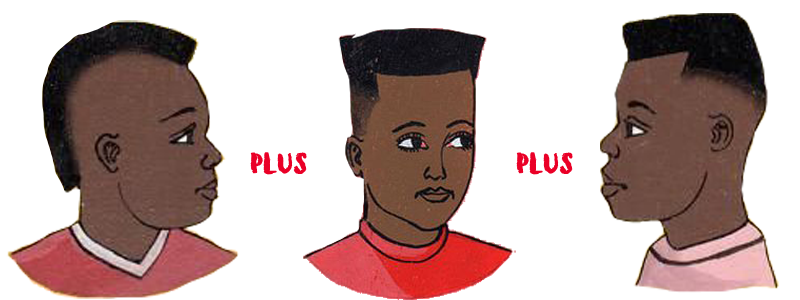
<style>
.page{position:relative;width:800px;height:300px;background:#ffffff}
.page>*{position:absolute;margin:0}
.t1{font:48px "TropicalAsianDEMO-Regular";color:#ea0027}
</style>
<div class="page">
<p class="t1" style="left:250px;top:152px;width:57px;height:23px">plus</p>
<p class="t1" style="left:516px;top:152px;width:57px;height:23px">plus</p>
</div>
